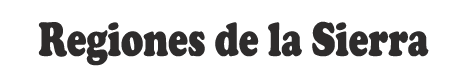
<style>
.page{position:relative;width:466px;height:76px;background:#ffffff}
.page>*{position:absolute;margin:0}
.t1{font:49.7px "CooperBlack";color:#2e2c2c;scale:0.75 1}
</style>
<div class="page">
<p class="t1" style="left:38px;top:21px;width:391px;height:45px">Regiones de la Sierra</p>
</div>
